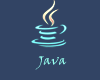
<style>
.page{position:relative;width:100px;height:80px;background:#324464}
.page>*{position:absolute;margin:0}
.t1{font:12px "VinerHandITC";color:#95feee}
</style>
<div class="page">
<p class="t1" style="left:35px;top:56px;width:32px;height:14px">Java</p>
</div>
